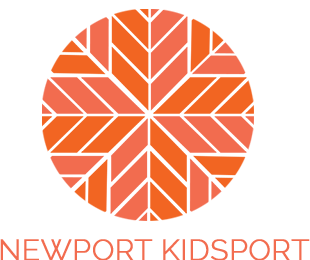
<style>
.page{position:relative;width:310px;height:260px;background:#ffffff}
.page>*{position:absolute;margin:0}
.t1{font:28.8px "Raleway-Light";color:#f26c4f;text-transform:uppercase;font-weight:bold}
</style>
<div class="page">
<p class="t1" style="left:0px;top:239px;width:310px;height:22px">newport kidsport</p>
</div>
